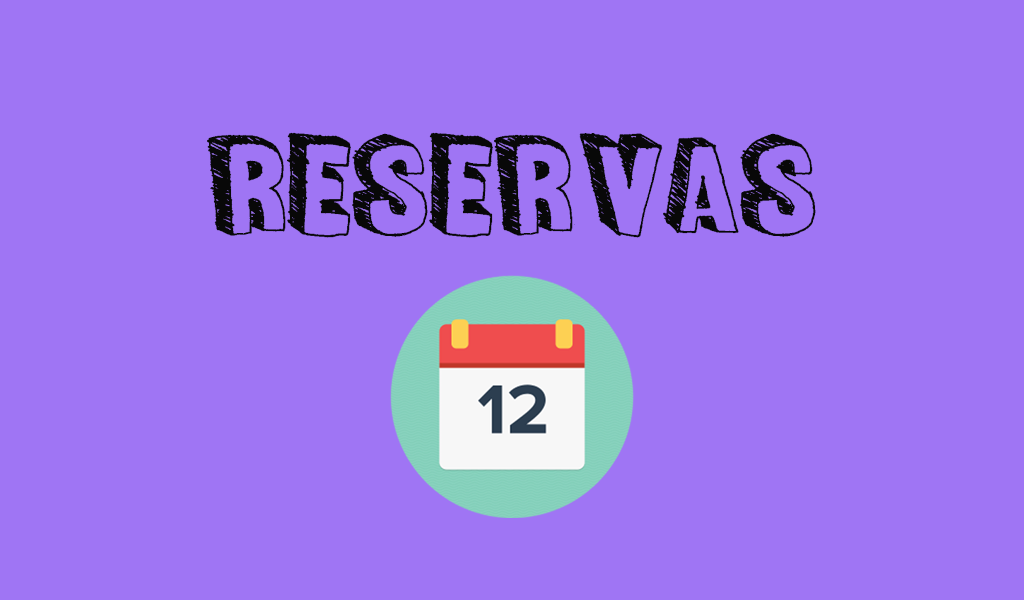
<style>
.page{position:relative;width:1024px;height:600px;background:#9f75f4}
.page>*{position:absolute;margin:0}
.t1{font:100.5px "FunSized";color:#080808}
</style>
<div class="page">
<p class="t1" style="left:207px;top:132px;width:609px;height:106px">Reservas</p>
</div>
